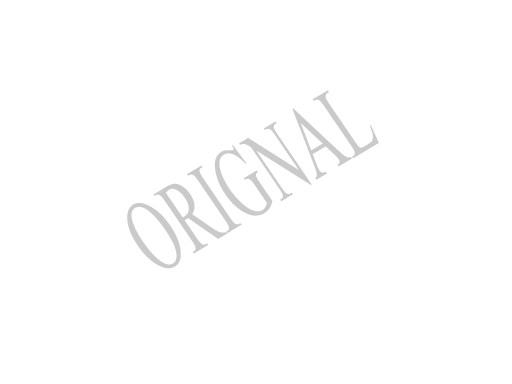
<style>
.page{position:relative;width:512px;height:384px;background:#ffffff}
.page>*{position:absolute;margin:0}
.t1{font:108.1px "TimesNewRomanPSMT";color:#cacaca;scale:0.54 1}
.t2{font:108.1px "TimesNewRomanPSMT";color:#dad8d8;scale:0.54 1}
</style>
<div class="page">
<p class="t1" style="left:127px;top:90px;width:252px;height:179px;rotate:-31deg"><span class="t2">   </span>ORIGNAL</p>
</div>
